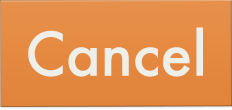
<style>
.page{position:relative;width:232px;height:110px}
.page>*{position:absolute;margin:0}
.t1{font:58.4px "Futura-Medium";color:#eeefe9}
</style>
<div class="page">
<p class="t1" style="left:28px;top:27px;width:175px;height:50px">Cancel</p>
</div>
